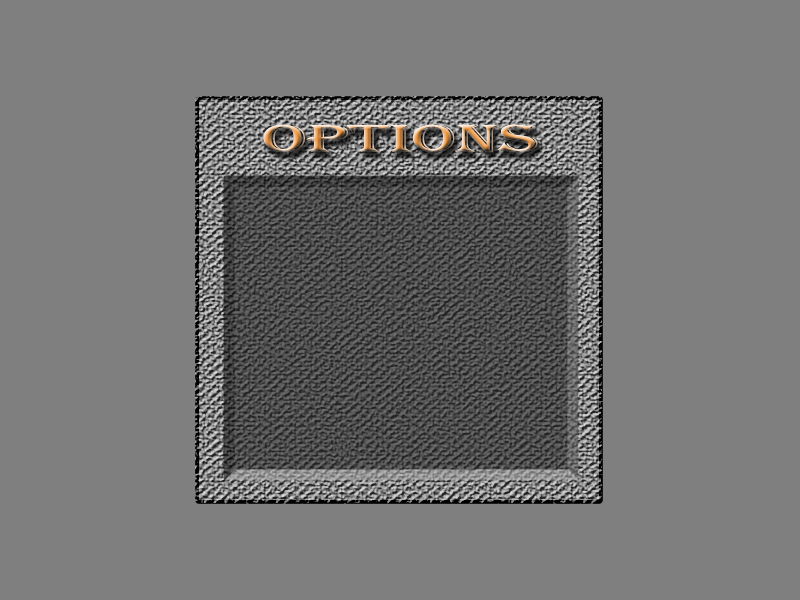
<style>
.page{position:relative;width:800px;height:600px;background:#7f7f7f}
.page>*{position:absolute;margin:0}
.t1{font:40.4px "Algerian";scale:1.76 1}
</style>
<div class="page">
<p class="t1" style="left:263px;top:124px;width:275px;height:29px">Options</p>
</div>
